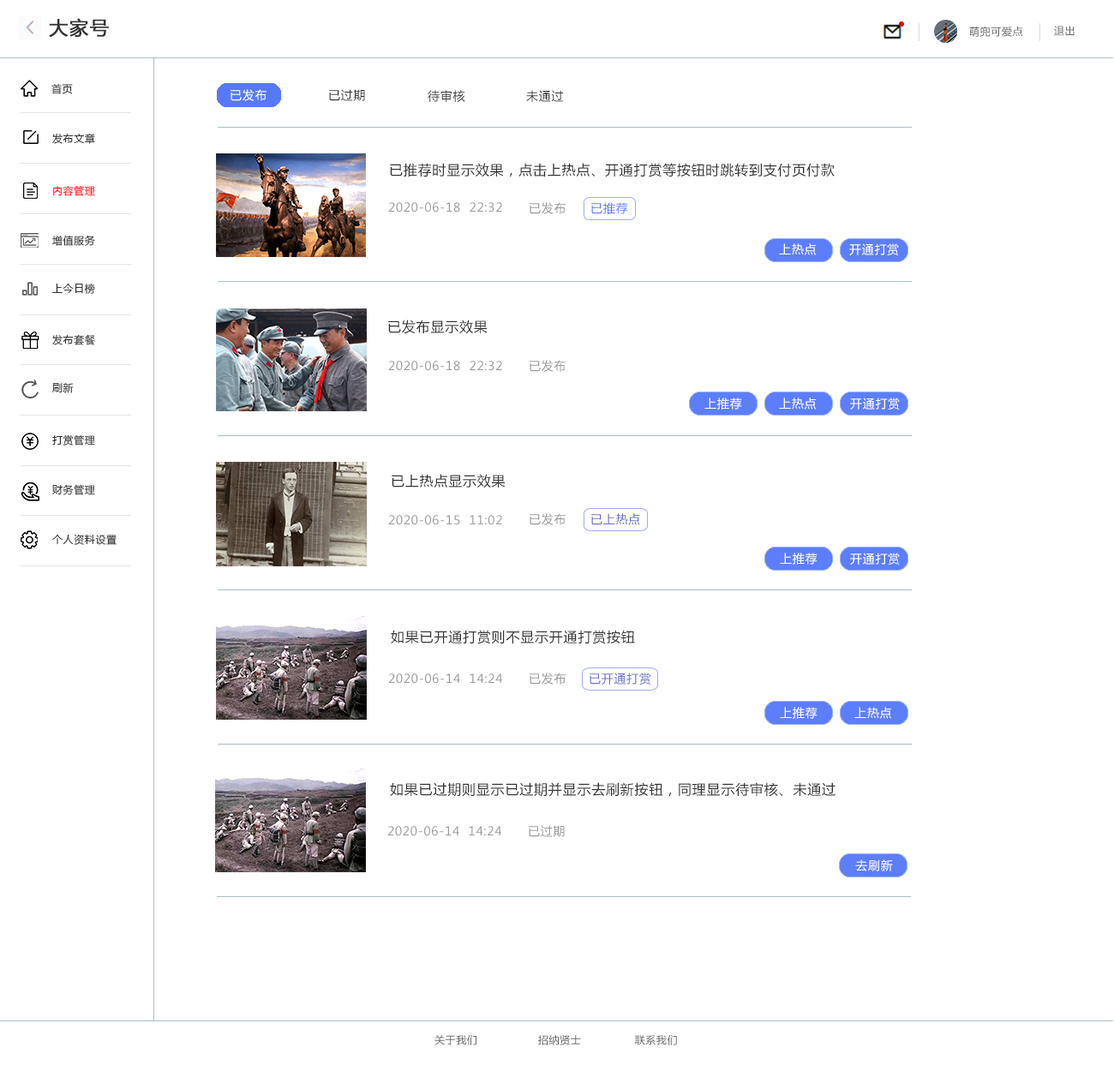
<style>
.page{position:relative;width:1114px;height:1071px;background:#ffffff}
.page>*{position:absolute;margin:0}
.t1{font:18.8px "MicrosoftYaHei";letter-spacing:0.05em;color:#333333;font-weight:bold}
.t2{font:10.3px "MicrosoftYaHei";letter-spacing:0.05em;color:#666666}
.t3{font:10.3px "MicrosoftYaHei";letter-spacing:0.05em;color:#333333}
.t4{font:12px "MicrosoftYaHei";letter-spacing:0.05em;color:#ffffff}
.t5{font:12px "MicrosoftYaHei";letter-spacing:0.05em;color:#333333}
.t6{font:13.7px "MicrosoftYaHei";letter-spacing:0.05em;color:#333333}
.t7{font:10.3px "MicrosoftYaHei";letter-spacing:0.05em;color:#ff0000}
.t8{font:12px "MicrosoftYaHei";letter-spacing:0.05em;color:#999999}
.t9{font:12px "MicrosoftYaHei";letter-spacing:0.05em;color:#5d7efa}
.t10{font:12px "MicrosoftYaHei";letter-spacing:0.05em;color:#646fcd}
</style>
<div class="page">
<p class="t1" style="left:49px;top:18px;width:60px;height:20px">大家号</p>
<p class="t2" style="left:969px;top:27px;width:54px;height:10px">萌兜可爱点</p>
<p class="t2" style="left:1054px;top:26px;width:20px;height:10px">退出</p>
<p class="t3" style="left:51px;top:83px;width:22px;height:11px">首页</p>
<p class="t4" style="left:230px;top:89px;width:36px;height:12px">已发布</p>
<p class="t5" style="left:329px;top:89px;width:36px;height:12px">已过期</p>
<p class="t5" style="left:427px;top:90px;width:38px;height:12px">待审核</p>
<p class="t5" style="left:526px;top:90px;width:38px;height:12px">未通过</p>
<p class="t3" style="left:52px;top:133px;width:43px;height:11px">发布文章</p>
<p class="t6" style="left:390px;top:163px;width:444px;height:14px">已推荐时显示效果，点击上热点、开通打赏等按钮时跳转到支付页付款</p>
<p class="t7" style="left:53px;top:185px;width:42px;height:11px">内容管理</p>
<p class="t8" style="left:388px;top:202px;width:114px;height:10px">2020-06-18  22:32</p>
<p class="t8" style="left:529px;top:202px;width:36px;height:12px">已发布</p>
<p class="t9" style="left:591px;top:202px;width:37px;height:12px">已推荐</p>
<p class="t3" style="left:52px;top:235px;width:43px;height:11px">增值服务</p>
<p class="t4" style="left:779px;top:243px;width:37px;height:12px">上热点</p>
<p class="t4" style="left:849px;top:243px;width:50px;height:12px">开通打赏</p>
<p class="t3" style="left:52px;top:283px;width:43px;height:11px">上今日榜</p>
<p class="t6" style="left:388px;top:320px;width:99px;height:14px">已发布显示效果</p>
<p class="t3" style="left:52px;top:334px;width:43px;height:11px">发布套餐</p>
<p class="t8" style="left:388px;top:361px;width:114px;height:10px">2020-06-18  22:32</p>
<p class="t8" style="left:529px;top:360px;width:36px;height:12px">已发布</p>
<p class="t3" style="left:52px;top:383px;width:22px;height:10px">刷新</p>
<p class="t3" style="left:52px;top:434px;width:43px;height:11px">打赏管理</p>
<p class="t6" style="left:391px;top:474px;width:114px;height:14px">已上热点显示效果</p>
<p class="t3" style="left:52px;top:484px;width:43px;height:11px">财务管理</p>
<p class="t8" style="left:388px;top:515px;width:114px;height:10px">2020-06-15  11:02</p>
<p class="t8" style="left:529px;top:513px;width:36px;height:12px">已发布</p>
<p class="t10" style="left:591px;top:513px;width:49px;height:12px">已上热点</p>
<p class="t3" style="left:52px;top:534px;width:65px;height:11px">个人资料设置</p>
<p class="t6" style="left:391px;top:630px;width:244px;height:14px">如果已开通打赏则不显示开通打赏按钮</p>
<p class="t8" style="left:388px;top:673px;width:114px;height:11px">2020-06-14  14:24</p>
<p class="t8" style="left:529px;top:672px;width:37px;height:12px">已发布</p>
<p class="t10" style="left:589px;top:672px;width:61px;height:12px">已开通打赏</p>
<p class="t6" style="left:390px;top:782px;width:445px;height:15px">如果已过期则显示已过期并显示去刷新按钮，同理显示待审核、未通过</p>
<p class="t8" style="left:387px;top:826px;width:114px;height:10px">2020-06-14  14:24</p>
<p class="t8" style="left:529px;top:825px;width:36px;height:12px">已过期</p>
<p class="t4" style="left:855px;top:859px;width:38px;height:12px">去刷新</p>
<p class="t2" style="left:434px;top:1035px;width:243px;height:10px">关于我们                 招纳贤士               联系我们</p>
</div>
